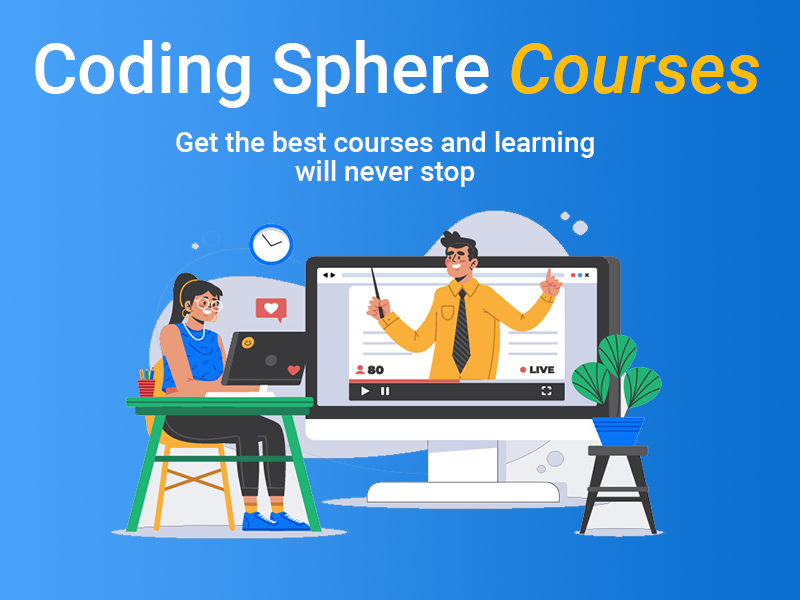
<style>
.page{position:relative;width:800px;height:600px}
.page>*{position:absolute;margin:0}
.t1{font:70px "Roboto-Medium";color:#ffffff}
.t2{font:70px "Roboto-MediumItalic";color:#ffbd07}
.t3{font:28px/5.8px "Roboto-Medium";color:#ffffff}
</style>
<div class="page">
<p class="t1" style="left:35px;top:40px;width:724px;height:68px">Coding Sphere <span class="t2">Courses</span></p>
<p class="t3" style="left:176px;top:131px;width:418px;height:56px;text-align:center">Get the best courses and learning <br><br><br><br><br>will never stop</p>
</div>
